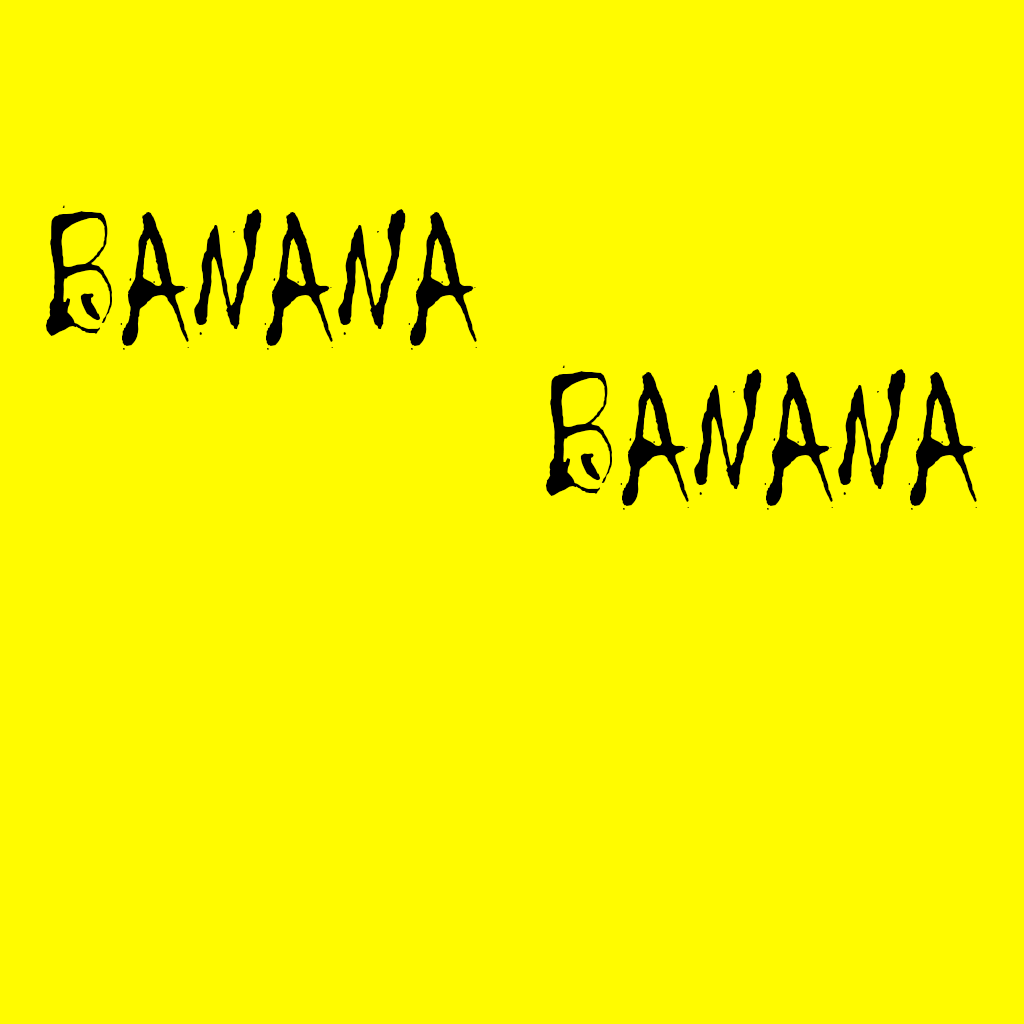
<style>
.page{position:relative;width:1024px;height:1024px;background:#fffb00}
.page>*{position:absolute;margin:0}
.t1{font:183.3px "Chiller-Regular";color:#000000;scale:0.8 1}
</style>
<div class="page">
<p class="t1" style="left:45px;top:205px;width:432px;height:145px">BANANA</p>
<p class="t1" style="left:545px;top:365px;width:432px;height:145px">BANANA</p>
</div>
